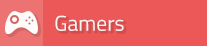
<style>
.page{position:relative;width:211px;height:51px;background:#ec5757}
.page>*{position:absolute;margin:0}
.t1{font:21.5px "TitilliumWeb-Regular";color:#f7f7f7}
</style>
<div class="page">
<p class="t1" style="left:55px;top:15px;width:69px;height:16px;opacity:0.97">Gamers</p>
</div>
